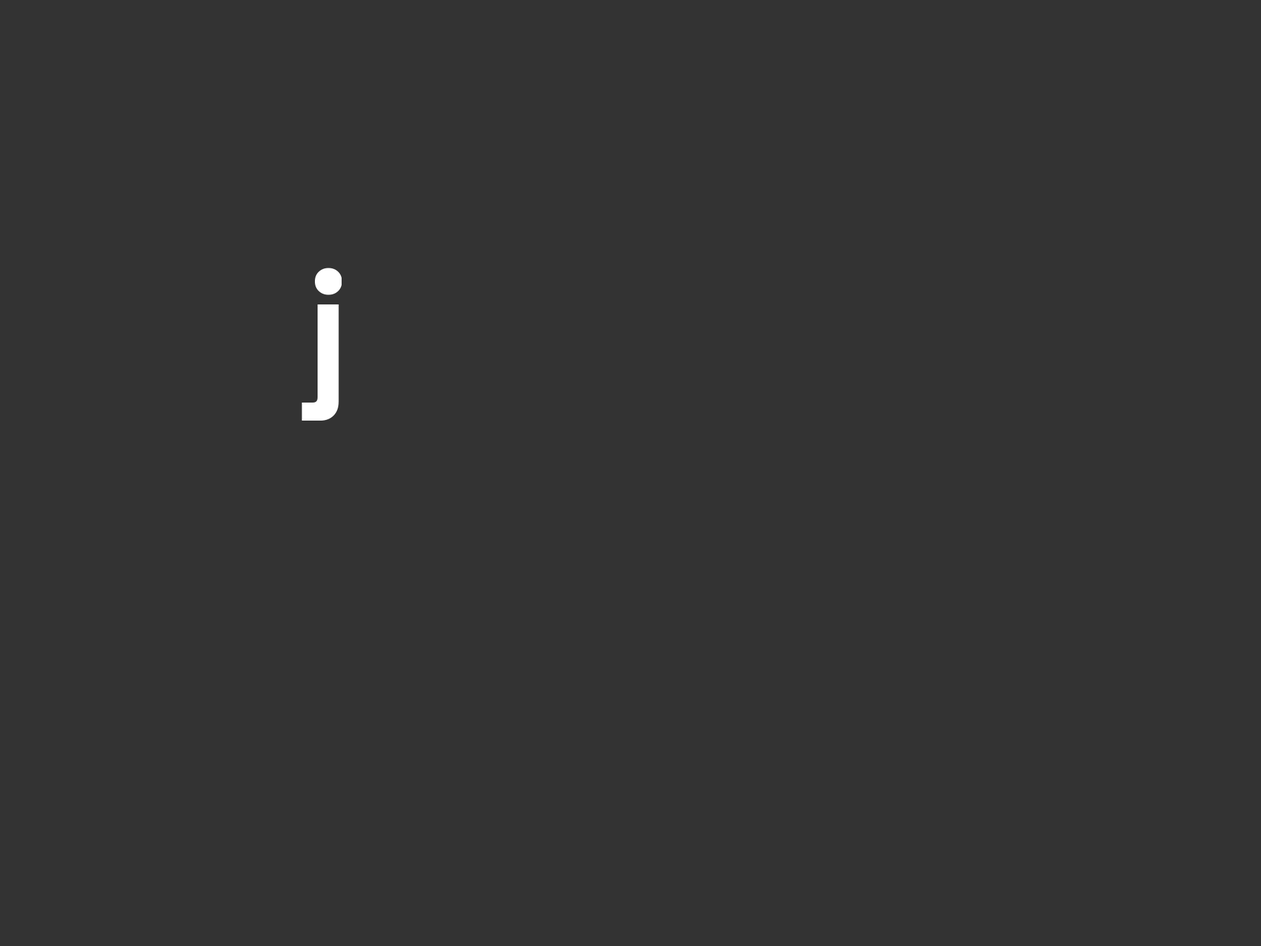
<style>
.page{position:relative;width:1261px;height:946px;background:#333333}
.page>*{position:absolute;margin:0}
.t1{font:166.8px "SpaceGrotesk-Bold";letter-spacing:-0.1em;color:#ffffff}
</style>
<div class="page">
<p class="t1" style="left:302px;top:268px;width:40px;height:152px">j</p>
</div>
